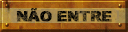
<style>
.page{position:relative;width:128px;height:32px}
.page>*{position:absolute;margin:0}
.t1{font:13.3px "Arial-Black";letter-spacing:-0.06em;font-weight:bold;scale:1.15 1}
</style>
<div class="page">
<p class="t1" style="left:16px;top:8px;width:96px;height:14px">NÃO ENTRE</p>
</div>
